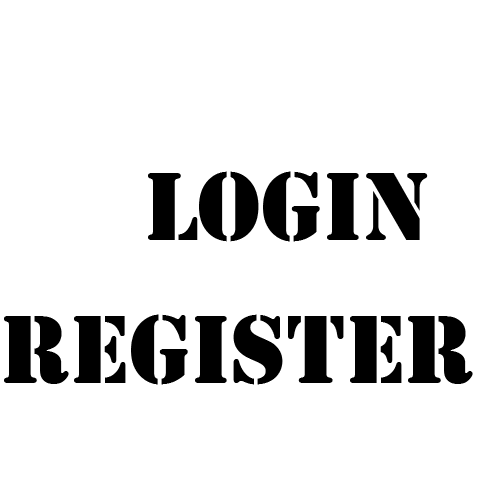
<style>
.page{position:relative;width:500px;height:500px;background:#ffffff}
.page>*{position:absolute;margin:0}
.t1{font:100px "Stencil";color:#000000}
</style>
<div class="page">
<p class="t1" style="left:148px;top:171px;width:280px;height:71px">LOGIN</p>
<p class="t1" style="left:4px;top:314px;width:469px;height:71px">REGISTER</p>
</div>
